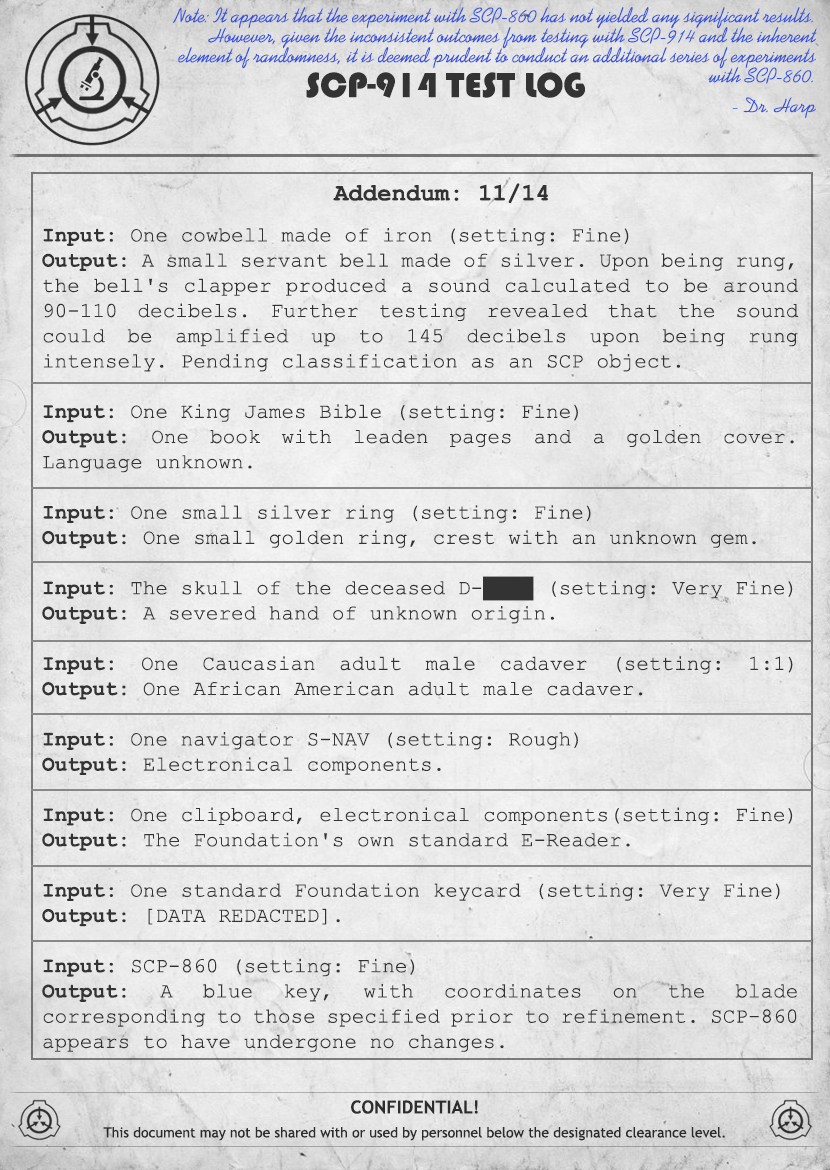
<style>
.page{position:relative;width:830px;height:1170px}
.page>*{position:absolute;margin:0}
.t1{font:21px/20px "Kaufmann";color:#3552de}
.t2{font:36px "Bauhaus93";color:#333333;text-transform:uppercase}
.t3{font:21px "Kaufmann";color:#3552de}
.t4{font:24px "CourierNewPS-BoldMT";color:#333333}
.t5{font:21px "CourierNewPSMT";color:#333333}
.t6{font:21px "CourierNewPS-BoldMT";color:#333333}
.t7{font:14px/24px "TrebuchetMS";color:#333333}
.t8{font:18px/24px "TrebuchetMS-Bold";color:#333333}
</style>
<div class="page">
<p class="t1" style="left:172px;top:7px;width:645px;height:77px;text-align:right">Note: It appears that the experiment with SCP-860 has not yielded any significant results. However, given the inconsistent outcomes from testing with SCP-914 and the inherent element of randomness, it is deemed prudent to conduct an additional series of experiments with SCP-860.</p>
<p class="t2" style="left:306px;top:72px;width:279px;height:26px">SCP-914 Test log</p>
<p class="t3" style="left:732px;top:97px;width:84px;height:22px">- Dr. Harp</p>
<p class="t4" style="left:333px;top:183px;width:215px;height:21px">Addendum: 11/14</p>
<p class="t5" style="left:42px;top:228px;width:757px;height:824px;text-align:justify"><span class="t6">Input:</span> One cowbell made of iron (setting: Fine)<br><span class="t6">Output:</span> A small servant bell made of silver. Upon being rung, the bell's clapper produced a sound calculated to be around 90-110 decibels. Further testing revealed that the sound could be amplified up to 145 decibels upon being rung intensely. Pending classification as an SCP object.<br><br><span class="t6">Input:</span> One King James Bible (setting: Fine)<br><span class="t6">Output:</span> One book with leaden pages and a golden cover. Language unknown.<br><br><span class="t6">Input:</span> One small silver ring (setting: Fine)<br><span class="t6">Output:</span> One small golden ring, crest with an unknown gem.<br><br><span class="t6">Input:</span> The skull of the deceased D-████ (setting: Very Fine)<br><span class="t6">Output:</span> A severed hand of unknown origin.<br><br><span class="t6">Input:</span> One Caucasian adult male cadaver (setting: 1:1) <span class="t6">Output:</span> One African American adult male cadaver.<br><br><span class="t6">Input: </span>One navigator S-NAV (setting: Rough) <br><span class="t6">Output: </span>Electronical components.<br><br><span class="t6">Input: </span>One clipboard, electronical components(setting: Fine) <br><span class="t6">Output: </span>The Foundation's own standard E-Reader.<br><br><span class="t6">Input:</span> One standard Foundation keycard (setting: Very Fine)<br><span class="t6">Output:</span> [DATA REDACTED].<br><span class="t6"><br>Input: </span>SCP-860 (setting: Fine)<br><span class="t6">Output: </span>A blue key, with coordinates on the blade corresponding to those specified prior to refinement. SCP-860 appears to have undergone no changes.</p>
<p class="t7" style="left:103px;top:1100px;width:622px;height:41px;text-align:center"><span class="t8">CONFIDENTIAL!<br></span>This document may not be shared with or used by personnel below the designated clearance level.</p>
</div>
